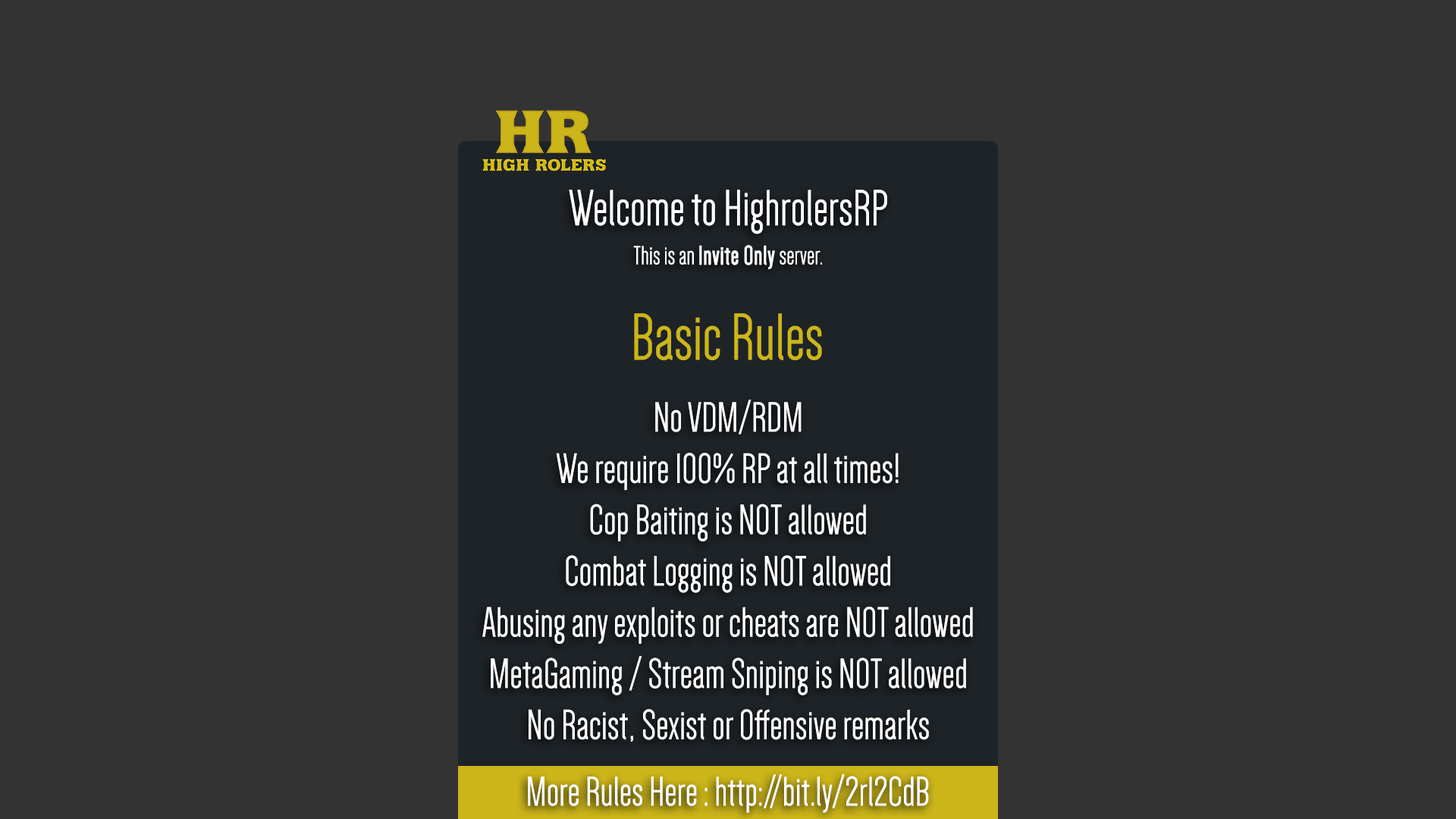
<style>
.page{position:relative;width:1456px;height:819px;background:#333333}
.page>*{position:absolute;margin:0}
.t1{font:43.7px/25.6px "Dense-Regular";color:#ffffff}
.t2{font:52.3px/19.6px "Dense-Regular";color:#ffffff}
.t3{font:27.3px/19.6px "Dense-Regular";color:#ffffff}
.t4{font:27.3px/19.6px "Dense-Regular";color:#ffffff;font-weight:bold}
.t5{font:68.7px "Dense-Regular";color:#ccb519}
.t6{font:43px "Dense-Regular";color:#ffffff}
</style>
<div class="page">
<p class="t1" style="left:482px;top:190px;width:491px;height:552px;text-align:center"><span class="t2">Welcome to HighrolersRP<br><br></span><span class="t3">This is an </span><span class="t4">Invite Only</span><span class="t3"> server.<br><br><br></span><br><br><br><br>No VDM/RDM<br><br>We require 100% RP at all times!<br><br>Cop Baiting is NOT allowed<br><br>Combat Logging is NOT allowed<br><br>Abusing any exploits or cheats are NOT allowed<br><br>MetaGaming / Stream Sniping is NOT allowed<br><br>No Racist, Sexist or Offensive remarks</p>
<p class="t5" style="left:634px;top:313px;width:188px;height:47px">Basic Rules</p>
<p class="t6" style="left:528px;top:774px;width:401px;height:39px">More Rules Here : http://bit.ly/2rl2CdB</p>
</div>
